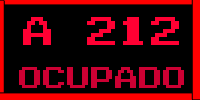
<style>
.page{position:relative;width:200px;height:100px;background:#000000}
.page>*{position:absolute;margin:0}
.t1{font:40px "Zig";color:#ff0033}
.t2{font:30px "Zig";color:#cc0033}
</style>
<div class="page">
<p class="t1" style="left:23px;top:17px;width:156px;height:28px">a 212</p>
<p class="t2" style="left:19px;top:67px;width:165px;height:21px">ocupado</p>
</div>
